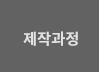
<style>
.page{position:relative;width:99px;height:78px;background:#626262}
.page>*{position:absolute;margin:0}
.t1{font:15.4px "NotoSansCJKkr-Bold";color:#e2e2e2}
</style>
<div class="page">
<p class="t1" style="left:23px;top:31px;width:55px;height:15px">제작과정</p>
</div>
